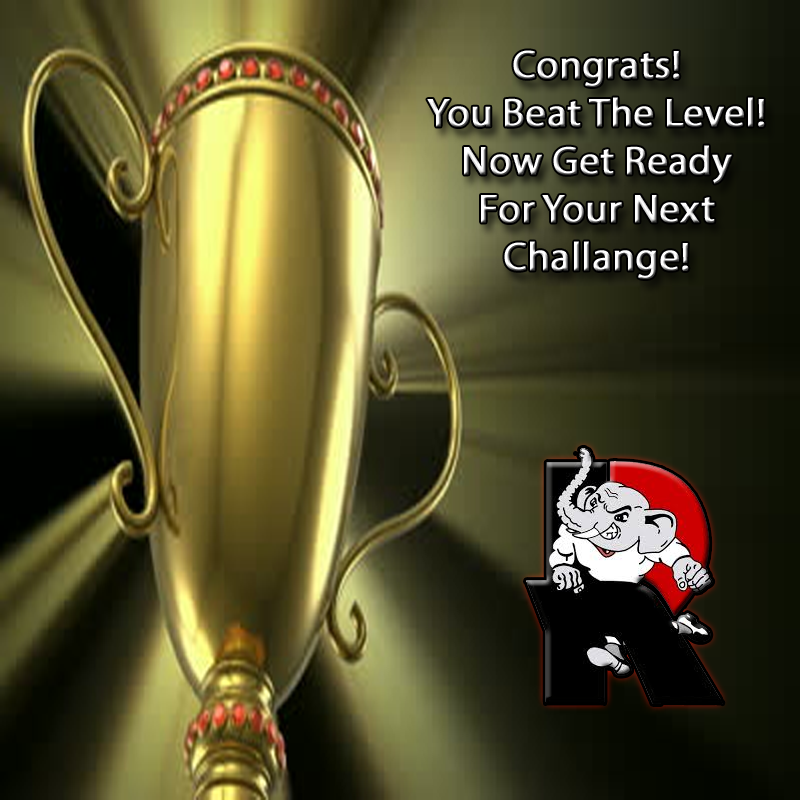
<style>
.page{position:relative;width:800px;height:800px}
.page>*{position:absolute;margin:0}
.t1{font:40px "MyriadPro-Regular";font-weight:bold}
</style>
<div class="page">
<p class="t1" style="left:427px;top:50px;width:338px;height:229px;text-align:center">Congrats! <br>You Beat The Level!<br>Now Get Ready<br>For Your Next Challange!</p>
</div>
